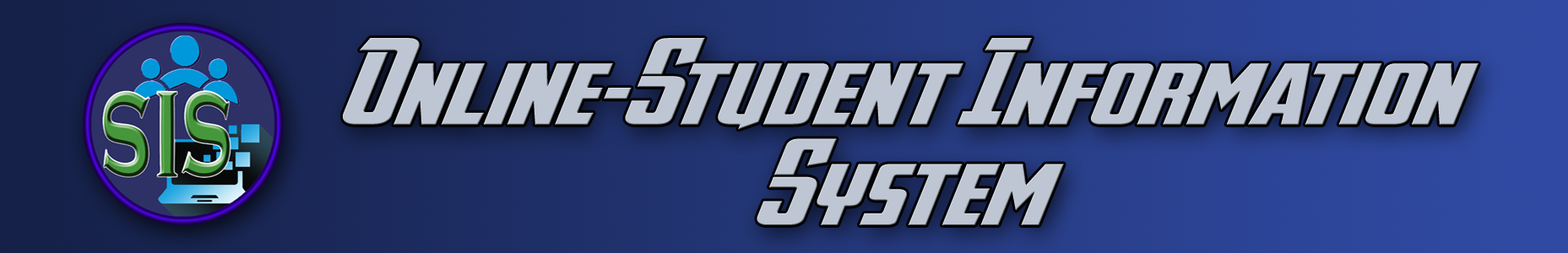
<style>
.page{position:relative;width:1568px;height:253px}
.page>*{position:absolute;margin:0}
.t1{font:83.9px "AvengeanceHeroicAvengerNormal";color:#bec6d4;scale:1.38 1}
</style>
<div class="page">
<p class="t1" style="left:343px;top:38px;width:1135px;height:187px;text-align:center">Online-Student Information System</p>
</div>
